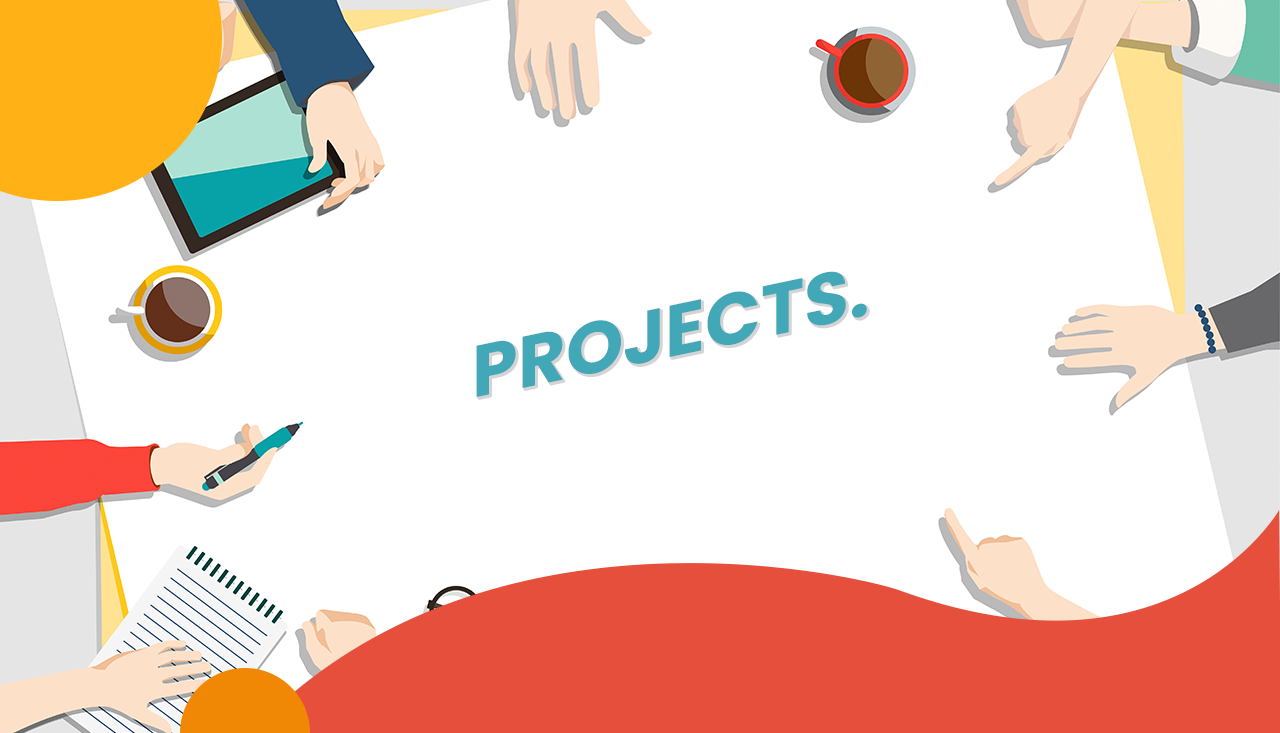
<style>
.page{position:relative;width:1280px;height:733px;background:#ffffff}
.page>*{position:absolute;margin:0}
.t1{font:73.1px "Poppins-Bold";color:#42a7b7}
</style>
<div class="page">
<p class="t1" style="left:476px;top:271px;width:391px;height:126px;rotate:-12deg">PROJECTS.</p>
</div>
